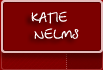
<style>
.page{position:relative;width:103px;height:70px;background:#7c0000}
.page>*{position:absolute;margin:0}
.t1{font:14px "BetinaScript";color:#ffffff}
.t2{font:11px "Tahoma";color:#ffffff}
</style>
<div class="page">
<p class="t1" style="left:31px;top:11px;width:48px;height:28px"><span class="t2">  </span>KATIE<br>  NELMS</p>
</div>
